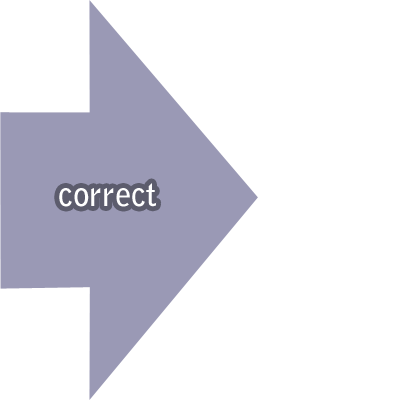
<style>
.page{position:relative;width:400px;height:400px;background:#ffffff}
.page>*{position:absolute;margin:0}
.t1{font:33.3px "BellGothicStd-Bold";letter-spacing:-0.01em;color:#ffffff}
</style>
<div class="page">
<p class="t1" style="left:59px;top:183px;width:98px;height:24px">correct</p>
</div>
